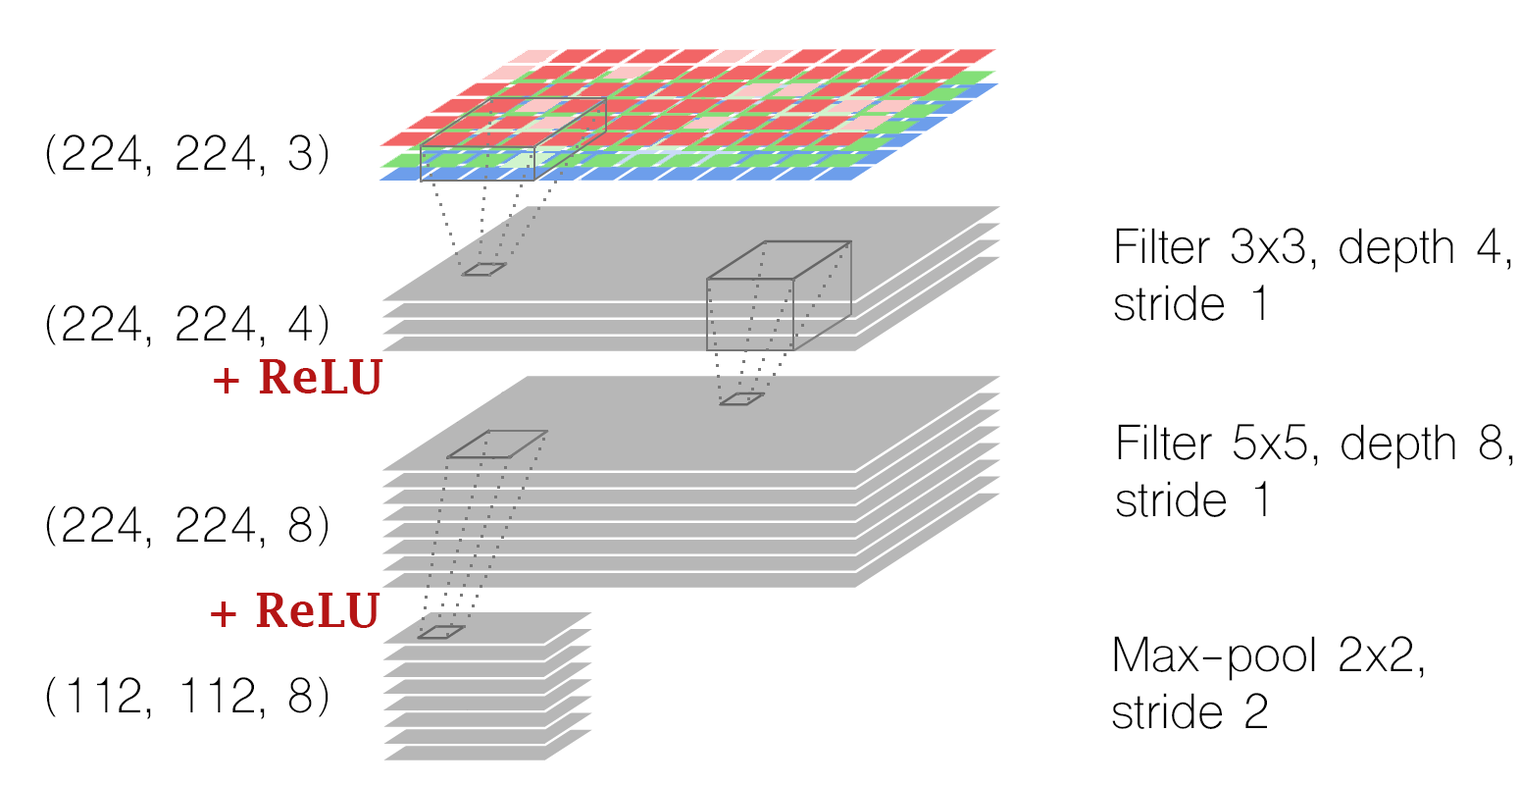
<style>
.page{position:relative;width:1520px;height:785px;background:#ffffff}
.page>*{position:absolute;margin:0}
.t1{font:47.1px "ShreeDev0714";color:#000000}
.t2{font:47.1px "LucidaFax-Demi";color:#b51515}
</style>
<div class="page">
<p class="t1" style="left:46px;top:133px;width:283px;height:44px">(224, 224, 3)</p>
<p class="t1" style="left:1114px;top:228px;width:397px;height:93px">Filter 3x3, depth 4,<br>stride 1</p>
<p class="t1" style="left:46px;top:304px;width:283px;height:43px">(224, 224, 4)</p>
<p class="t2" style="left:214px;top:359px;width:169px;height:35px">+ ReLU</p>
<p class="t1" style="left:1116px;top:424px;width:397px;height:93px">Filter 5x5, depth 8,<br>stride 1</p>
<p class="t1" style="left:46px;top:505px;width:283px;height:43px">(224, 224, 8)</p>
<p class="t2" style="left:211px;top:592px;width:169px;height:36px">+ ReLU</p>
<p class="t1" style="left:1112px;top:635px;width:312px;height:94px">Max-pool 2x2,<br>stride 2</p>
<p class="t1" style="left:46px;top:676px;width:283px;height:43px">(112, 112, 8)</p>
</div>
